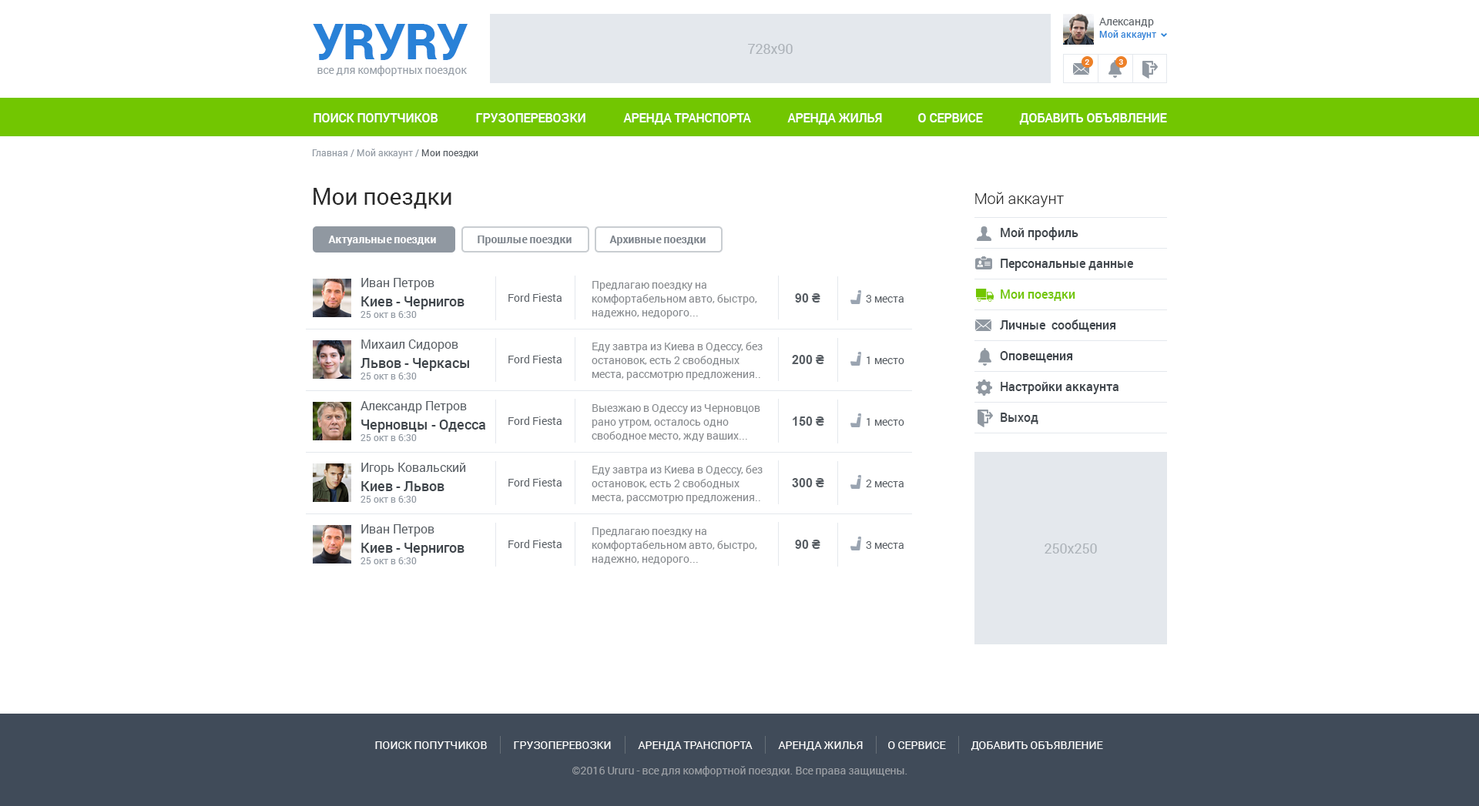
<style>
.page{position:relative;width:1479px;height:806px;background:#ffffff}
.page>*{position:absolute;margin:0}
.t1{font:10.8px "Roboto-Regular";color:#585e64}
.t2{font:49.3px "Roboto-Black";letter-spacing:-0.01em;color:#2981d7}
.t3{font:9.2px "Roboto-Medium";color:#2981d7}
.t4{font:13.9px "Roboto-Regular";color:#acb2b8}
.t5{font:10.8px "Roboto-Regular";color:#949ca5}
.t6{font:7.7px "Roboto-Medium";color:#ffffff}
.t7{font:12.3px "Roboto-Medium";color:#ffffff;text-transform:uppercase}
.t8{font:9.2px "Roboto-Regular";color:#949ca5}
.t9{font:9.2px "Roboto-Regular";color:#585e64}
.t10{font:23.1px "Roboto-Regular";color:#2a2a2a}
.t11{font:15.4px "Roboto-Light";color:#2a2a2a}
.t12{font:12.3px "Roboto-Medium";color:#3f454b}
.t13{font:10.8px "Roboto-Bold";color:#ffffff}
.t14{font:10.8px "Roboto-Bold";color:#7c838b}
.t15{font:12.3px "Roboto-Regular";color:#585e64}
.t16{font:10.8px/13.9px "Roboto-Regular";color:#86898d}
.t17{font:12.3px "Arial-BoldMT";color:#585e64}
.t18{font:12.3px "Roboto-Medium";color:#72c601}
.t19{font:13.9px "Roboto-Medium";color:#3f454b}
.t20{font:10.8px "Roboto-Regular";color:#ffffff;text-transform:uppercase}
.t21{font:10.8px "Roboto-Regular";color:#9ca0a6}
</style>
<div class="page">
<p class="t1" style="left:1099px;top:18px;width:55px;height:10px">Александр</p>
<p class="t2" style="left:313px;top:24px;width:155px;height:36px">УRУRУ</p>
<p class="t3" style="left:1099px;top:30px;width:57px;height:10px">Мой аккаунт</p>
<p class="t4" style="left:748px;top:44px;width:45px;height:10px">728x90</p>
<p class="t5" style="left:317px;top:65px;width:150px;height:11px">все для комфортных поездок</p>
<p class="t6" style="left:1084px;top:59px;width:5px;height:6px">2</p>
<p class="t6" style="left:1118px;top:59px;width:5px;height:6px">3</p>
<p class="t7" style="left:313px;top:113px;width:125px;height:9px">Поиск попутчиков</p>
<p class="t7" style="left:476px;top:113px;width:109px;height:9px">грузоперевозки</p>
<p class="t7" style="left:623px;top:113px;width:128px;height:12px">Аренда транспорта</p>
<p class="t7" style="left:787px;top:113px;width:95px;height:12px">Аренда жилья</p>
<p class="t7" style="left:918px;top:113px;width:65px;height:9px">о сервисе</p>
<p class="t7" style="left:1019px;top:113px;width:148px;height:12px">добавить объявление</p>
<p class="t8" style="left:312px;top:149px;width:166px;height:10px">Главная / Мой аккаунт / <span class="t9">Мои поездки</span></p>
<p class="t10" style="left:313px;top:188px;width:138px;height:21px">Мои поездки</p>
<p class="t11" style="left:975px;top:192px;width:89px;height:15px">Мой аккаунт</p>
<p class="t12" style="left:1000px;top:227px;width:78px;height:13px">Мой профиль</p>
<p class="t13" style="left:328px;top:236px;width:108px;height:10px">Актуальные поездки</p>
<p class="t14" style="left:478px;top:236px;width:93px;height:10px">Прошлые поездки</p>
<p class="t14" style="left:609px;top:236px;width:96px;height:10px">Архивные поездки</p>
<p class="t12" style="left:1000px;top:259px;width:134px;height:12px">Персональные данные</p>
<p class="t15" style="left:361px;top:278px;width:73px;height:12px">Иван Петров</p>
<p class="t16" style="left:591px;top:281px;width:166px;height:38px">Предлагаю поездку на комфортабельном авто, быстро, надежно, недорого...</p>
<p class="t1" style="left:508px;top:293px;width:53px;height:9px">Ford Fiesta</p>
<p class="t17" style="left:795px;top:293px;width:25px;height:10px">90 ₴</p>
<p class="t18" style="left:1000px;top:290px;width:75px;height:11px">Мои поездки</p>
<p class="t19" style="left:361px;top:297px;width:103px;height:13px">Киев - Чернигов</p>
<p class="t1" style="left:866px;top:295px;width:37px;height:8px">3 места</p>
<p class="t8" style="left:360px;top:311px;width:57px;height:7px">25 окт в 6:30</p>
<p class="t12" style="left:1000px;top:320px;width:116px;height:12px">Личные  сообщения</p>
<p class="t15" style="left:361px;top:340px;width:97px;height:12px">Михаил Сидоров</p>
<p class="t16" style="left:591px;top:342px;width:171px;height:38px">Еду завтра из Киева в Одессу, без<br>остановок, есть 2 свободных места, рассмотрю предложения..</p>
<p class="t12" style="left:1000px;top:351px;width:73px;height:12px">Оповещения</p>
<p class="t19" style="left:360px;top:358px;width:109px;height:13px">Львов - Черкасы</p>
<p class="t1" style="left:508px;top:355px;width:53px;height:9px">Ford Fiesta</p>
<p class="t17" style="left:792px;top:355px;width:32px;height:9px">200 ₴</p>
<p class="t1" style="left:866px;top:357px;width:38px;height:7px">1 место</p>
<p class="t8" style="left:360px;top:373px;width:57px;height:7px">25 окт в 6:30</p>
<p class="t12" style="left:1000px;top:382px;width:118px;height:12px">Настройки аккаунта</p>
<p class="t15" style="left:360px;top:401px;width:107px;height:13px">Александр Петров</p>
<p class="t16" style="left:591px;top:404px;width:169px;height:38px">Выезжаю в Одессу из Черновцов рано утром, осталось одно свободное место, жду ваших...</p>
<p class="t12" style="left:1000px;top:413px;width:38px;height:11px">Выход</p>
<p class="t19" style="left:361px;top:420px;width:124px;height:13px">Черновцы - Одесса</p>
<p class="t1" style="left:508px;top:417px;width:53px;height:8px">Ford Fiesta</p>
<p class="t17" style="left:793px;top:417px;width:31px;height:9px">150 ₴</p>
<p class="t1" style="left:866px;top:418px;width:38px;height:8px">1 место</p>
<p class="t8" style="left:360px;top:434px;width:57px;height:7px">25 окт в 6:30</p>
<p class="t15" style="left:361px;top:463px;width:105px;height:12px">Игорь Ковальский</p>
<p class="t16" style="left:591px;top:465px;width:171px;height:39px">Еду завтра из Киева в Одессу, без<br>остановок, есть 2 свободных места, рассмотрю предложения..</p>
<p class="t19" style="left:361px;top:481px;width:83px;height:10px">Киев - Львов</p>
<p class="t1" style="left:508px;top:478px;width:53px;height:9px">Ford Fiesta</p>
<p class="t17" style="left:792px;top:478px;width:32px;height:10px">300 ₴</p>
<p class="t1" style="left:866px;top:480px;width:37px;height:8px">2 места</p>
<p class="t8" style="left:360px;top:496px;width:57px;height:7px">25 окт в 6:30</p>
<p class="t15" style="left:361px;top:524px;width:73px;height:13px">Иван Петров</p>
<p class="t16" style="left:591px;top:528px;width:166px;height:37px">Предлагаю поездку на комфортабельном авто, быстро, надежно, недорого...</p>
<p class="t19" style="left:361px;top:543px;width:103px;height:13px">Киев - Чернигов</p>
<p class="t1" style="left:508px;top:540px;width:53px;height:8px">Ford Fiesta</p>
<p class="t17" style="left:795px;top:540px;width:25px;height:9px">90 ₴</p>
<p class="t1" style="left:866px;top:541px;width:37px;height:8px">3 места</p>
<p class="t4" style="left:1044px;top:544px;width:53px;height:10px">250х250</p>
<p class="t8" style="left:360px;top:558px;width:57px;height:7px">25 окт в 6:30</p>
<p class="t20" style="left:375px;top:742px;width:112px;height:7px">Поиск попутчиков</p>
<p class="t20" style="left:514px;top:742px;width:97px;height:7px">грузоперевозки</p>
<p class="t20" style="left:638px;top:742px;width:114px;height:9px">Аренда транспорта</p>
<p class="t20" style="left:778px;top:742px;width:85px;height:9px">Аренда жилья</p>
<p class="t20" style="left:888px;top:742px;width:58px;height:7px">о сервисе</p>
<p class="t20" style="left:970px;top:742px;width:133px;height:9px">добавить объявление</p>
<p class="t21" style="left:572px;top:766px;width:335px;height:11px">©2016 Ururu - все для комфортной поездки. Все права защищены.</p>
</div>
